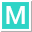
<style>
.page{position:relative;width:32px;height:32px;background:#2ed4c6}
.page>*{position:absolute;margin:0}
.t1{font:25.3px "Roboto-Medium";color:#ffffff}
</style>
<div class="page">
<p class="t1" style="left:6px;top:6px;width:19px;height:18px">M</p>
</div>
